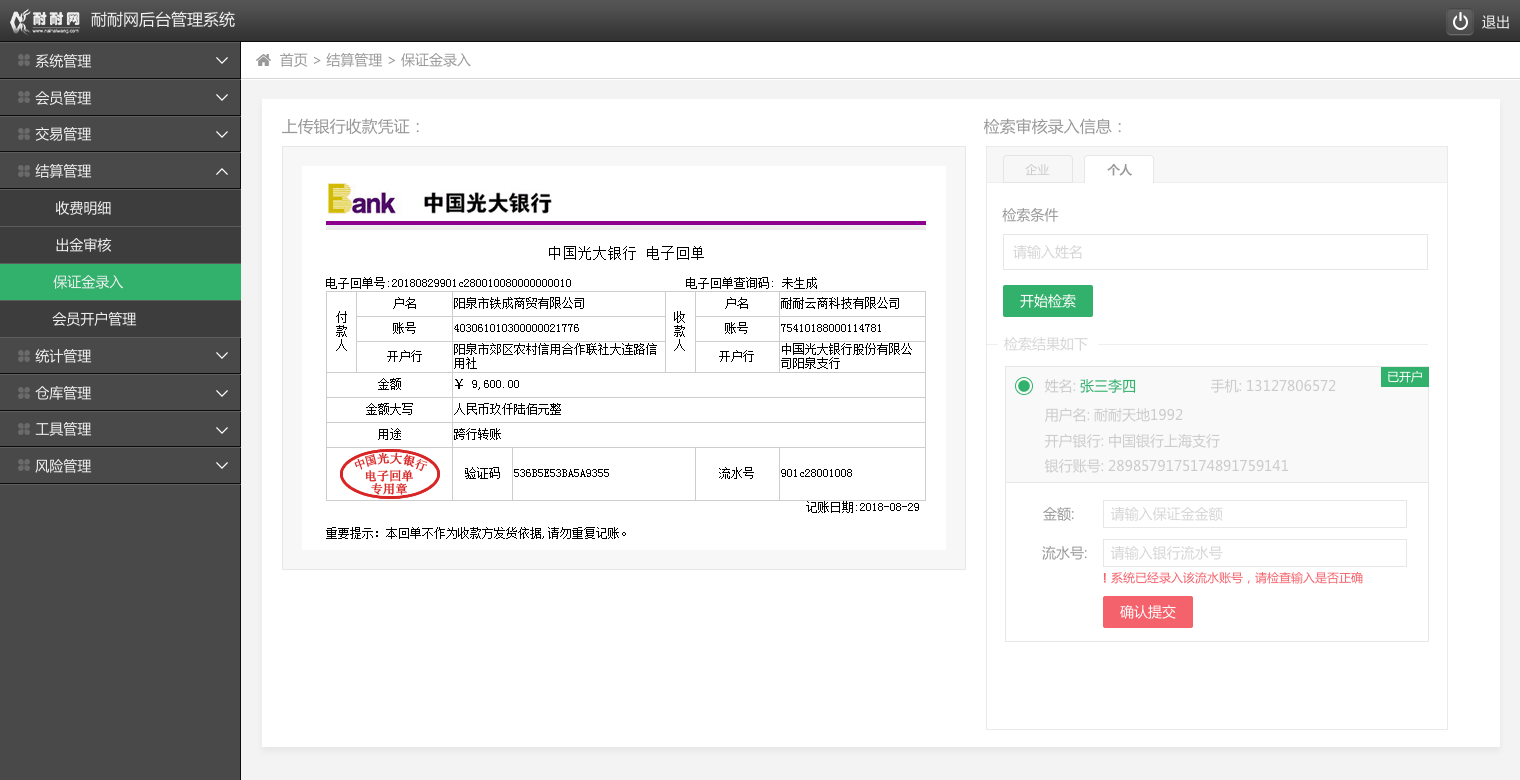
<style>
.page{position:relative;width:1520px;height:780px;background:#ffffff}
.page>*{position:absolute;margin:0}
.t1{font:16px "MicrosoftYaHei";color:#efefef}
.t2{font:14px "MicrosoftYaHei";color:#efefef}
.t3{font:14px "MicrosoftYaHei";color:#999999}
.t4{font:16px "MicrosoftYaHei";color:#999999}
.t5{font:12px "MicrosoftYaHei";color:#cccccc}
.t6{font:12px "MicrosoftYaHei";color:#999999;font-weight:bold}
.t7{font:14px "MicrosoftYaHei";color:#d6d6d6}
.t8{font:14px "MicrosoftYaHei";color:#fffcfc}
.t9{font:12px "MicrosoftYaHei";color:#ffffff}
.t10{font:14px "MicrosoftYaHei";color:#32b16c}
.t11{font:14px "MicrosoftYaHei";color:#cccccc}
.t12{font:12px "MicrosoftYaHei";color:#f4626c}
.t13{font:12px "MicrosoftYaHei";color:#f4626c;font-weight:bold}
</style>
<div class="page">
<p class="t1" style="left:91px;top:11px;width:144px;height:17px">耐耐网后台管理系统</p>
<p class="t2" style="left:1482px;top:15px;width:27px;height:14px">退出</p>
<p class="t2" style="left:35px;top:54px;width:57px;height:14px">系统管理</p>
<p class="t3" style="left:280px;top:53px;width:191px;height:14px">首页 &gt; 结算管理 &gt; 保证金录入</p>
<p class="t2" style="left:35px;top:91px;width:57px;height:14px">会员管理</p>
<p class="t4" style="left:282px;top:118px;width:137px;height:17px">上传银行收款凭证：</p>
<p class="t4" style="left:983px;top:118px;width:138px;height:17px">检索审核录入信息：</p>
<p class="t2" style="left:35px;top:127px;width:57px;height:14px">交易管理</p>
<p class="t2" style="left:35px;top:164px;width:57px;height:14px">结算管理</p>
<p class="t5" style="left:1025px;top:164px;width:25px;height:12px">企业</p>
<p class="t6" style="left:1107px;top:164px;width:25px;height:12px">个人</p>
<p class="t2" style="left:55px;top:201px;width:56px;height:14px">收费明细</p>
<p class="t3" style="left:1002px;top:208px;width:57px;height:14px">检索条件</p>
<p class="t2" style="left:56px;top:238px;width:56px;height:14px">出金审核</p>
<p class="t7" style="left:1013px;top:245px;width:69px;height:14px">请输入姓名</p>
<p class="t2" style="left:53px;top:275px;width:70px;height:14px">保证金录入</p>
<p class="t8" style="left:1020px;top:294px;width:56px;height:14px">开始检索</p>
<p class="t2" style="left:52px;top:312px;width:85px;height:14px">会员开户管理</p>
<p class="t7" style="left:1004px;top:337px;width:84px;height:14px">检索结果如下</p>
<p class="t2" style="left:35px;top:349px;width:57px;height:14px">统计管理</p>
<p class="t9" style="left:1388px;top:371px;width:34px;height:12px">已开户</p>
<p class="t2" style="left:35px;top:386px;width:57px;height:14px">仓库管理</p>
<p class="t10" style="left:1044px;top:379px;width:92px;height:14px"><span class="t11">姓名: </span>张三李四</p>
<p class="t11" style="left:1211px;top:379px;width:125px;height:14px">手机: 13127806572</p>
<p class="t11" style="left:1045px;top:408px;width:138px;height:14px">用户名: 耐耐天地1992</p>
<p class="t2" style="left:35px;top:422px;width:57px;height:14px">工具管理</p>
<p class="t11" style="left:1044px;top:434px;width:176px;height:14px">开户银行: 中国银行上海支行</p>
<p class="t2" style="left:35px;top:459px;width:57px;height:14px">风险管理</p>
<p class="t11" style="left:1044px;top:459px;width:244px;height:14px">银行账号: 2898579175174891759141</p>
<p class="t3" style="left:1043px;top:507px;width:31px;height:14px">金额:</p>
<p class="t7" style="left:1110px;top:507px;width:113px;height:14px">请输入保证金金额</p>
<p class="t3" style="left:1042px;top:546px;width:45px;height:14px">流水号:</p>
<p class="t7" style="left:1110px;top:546px;width:113px;height:14px">请输入银行流水号</p>
<p class="t12" style="left:1103px;top:572px;width:260px;height:12px"><span class="t13">! </span>系统已经录入该流水账号，请检查输入是否正确</p>
<p class="t8" style="left:1120px;top:605px;width:56px;height:14px">确认提交</p>
</div>
